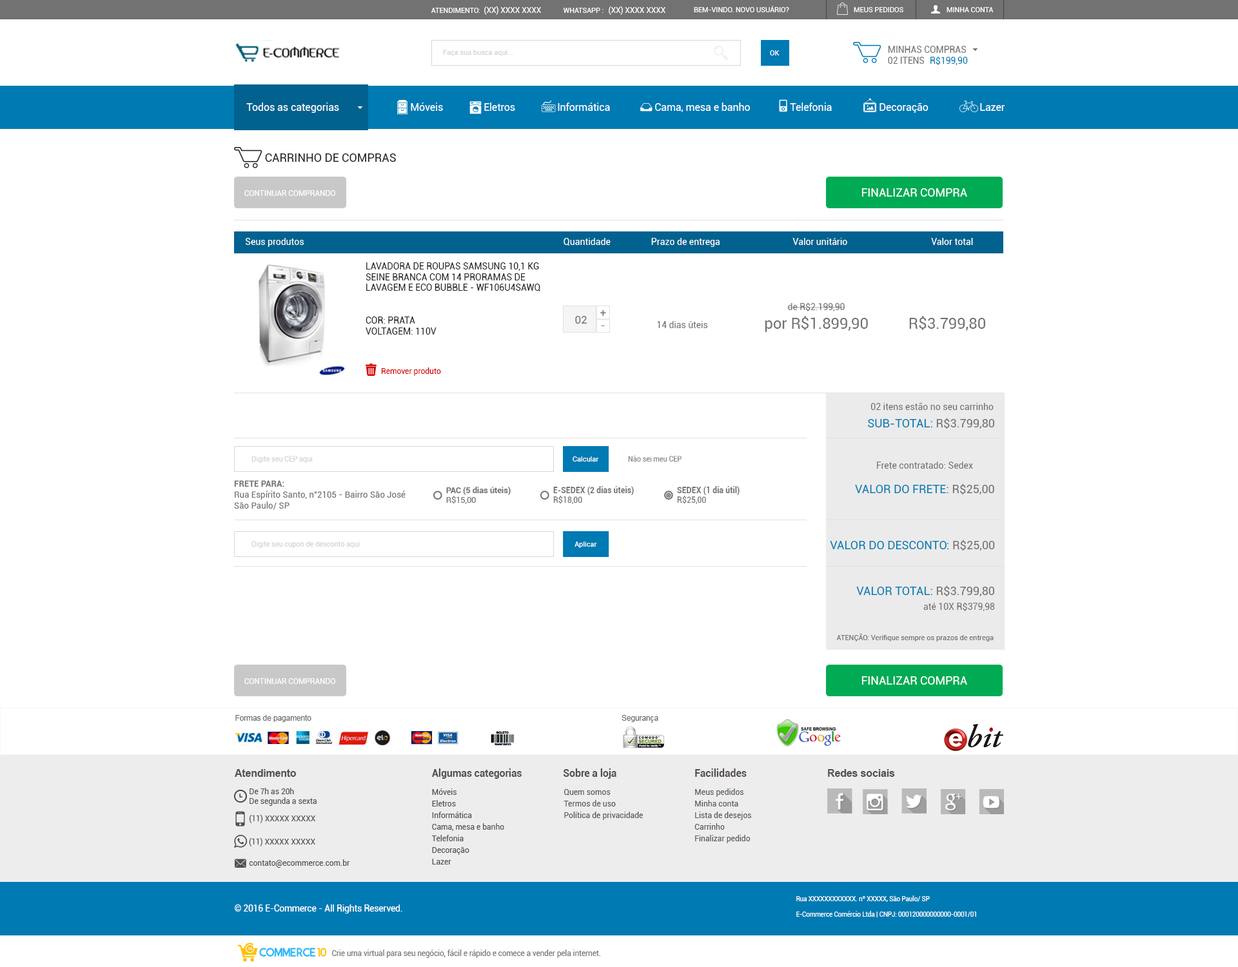
<style>
.page{position:relative;width:1238px;height:967px;background:#ffffff}
.page>*{position:absolute;margin:0}
.t1{font:8px "Roboto-Regular";letter-spacing:-0.005em;color:#ffffff;text-transform:uppercase;scale:0.96 1}
.t2{font:7.1px "Roboto-Regular";letter-spacing:-0.005em;color:#ffffff;text-transform:uppercase}
.t3{font:7.3px "Roboto-Regular";letter-spacing:-0.005em;color:#ffffff;text-transform:uppercase;scale:0.96 1}
.t4{font:7.1px "Roboto-Regular";letter-spacing:-0.005em;color:#d3d3d3}
.t5{font:7.1px "Roboto-Regular";letter-spacing:-0.005em;color:#ffffff}
.t6{font:8.9px "Roboto-Regular";letter-spacing:-0.005em;color:#727272;text-transform:uppercase}
.t7{font:8.9px "Roboto-Regular";letter-spacing:-0.005em;color:#007ab3;text-transform:uppercase}
.t8{font:10.3px "Roboto-Regular";letter-spacing:-0.005em;color:#ffffff}
.t9{font:11.6px "Roboto-Regular";color:#212121;text-transform:uppercase}
.t10{font:7.7px "Roboto-Regular";color:#ffffff;text-transform:uppercase}
.t11{font:11.6px "Roboto-Regular";color:#ffffff;text-transform:uppercase}
.t12{font:9px "Roboto-Regular";color:#ffffff}
.t13{font:9px "Roboto-Regular";color:#212121;text-transform:uppercase}
.t14{font:15.5px "Roboto-Regular";color:#717171}
.t15{font:9px "Roboto-Regular";color:#717171}
.t16{font:11px "Roboto-Regular";color:#727272}
.t17{font:7.7px "Roboto-Regular";color:#d20000}
.t18{font:11.6px "Roboto-Regular";color:#717171}
.t19{font:11.6px "Roboto-Regular";color:#007ab3;text-transform:uppercase}
.t20{font:11.6px "Roboto-Regular";color:#007ab3}
.t21{font:7.4px "Roboto-Regular";letter-spacing:-0.005em;color:#d3d3d3;scale:0.95 1}
.t22{font:7.4px "Roboto-Regular";letter-spacing:-0.005em;color:#878787;scale:0.95 1}
.t23{font:9px "Roboto-Regular";color:#717171;scale:0.95 1}
.t24{font:9px "Roboto-Bold";color:#717171;text-transform:uppercase;scale:0.95 1}
.t25{font:8.1px "Roboto-Bold";color:#717171}
.t26{font:8.1px "Roboto-Bold";color:#717171;text-transform:uppercase}
.t27{font:8.1px "Roboto-Regular";color:#717171;text-transform:uppercase}
.t28{font:7.1px "Roboto-Regular";color:#717171}
.t29{font:7.7px "ArialMT";letter-spacing:-0.01em;color:#6a6a6a}
.t30{font:10.3px "Arial-BoldMT";letter-spacing:-0.01em;color:#544f4d}
.t31{font:10.3px "Roboto-Bold";letter-spacing:-0.01em;color:#544f4d}
.t32{font:7.8px "Roboto-Regular";color:#544f4d}
.t33{font:7.7px/11.6px "Roboto-Regular";color:#544f4d}
.t34{font:9px "Roboto-Regular";color:#ffffff;scale:0.97 1}
.t35{font:6.4px "Roboto-Regular";color:#ffffff;scale:0.97 1}
.t36{font:7.7px "Roboto-Regular";color:#757575;scale:0.97 1}
</style>
<div class="page">
<p class="t1" style="left:484px;top:6px;width:57px;height:9px">(xx) xxxx xxxx</p>
<p class="t1" style="left:609px;top:6px;width:57px;height:9px">(xx) xxxx xxxx</p>
<p class="t2" style="left:694px;top:6px;width:95px;height:6px">Bem-vindo. Novo usuário?</p>
<p class="t3" style="left:431px;top:8px;width:49px;height:5px">Atendimento:</p>
<p class="t3" style="left:563px;top:8px;width:41px;height:5px">WhatsapP :</p>
<p class="t2" style="left:854px;top:7px;width:49px;height:5px">Meus pedidos</p>
<p class="t2" style="left:947px;top:7px;width:47px;height:5px">Minha Conta</p>
<p class="t4" style="left:443px;top:50px;width:70px;height:6px">Faça sua busca aqui...</p>
<p class="t5" style="left:770px;top:50px;width:10px;height:5px">OK</p>
<p class="t6" style="left:888px;top:46px;width:79px;height:7px">Minhas compras</p>
<p class="t6" style="left:888px;top:57px;width:37px;height:7px">02 itens</p>
<p class="t7" style="left:931px;top:56px;width:37px;height:9px">R$199,90</p>
<p class="t8" style="left:246px;top:103px;width:93px;height:10px">Todos as categorias</p>
<p class="t8" style="left:411px;top:103px;width:32px;height:8px">Móveis</p>
<p class="t8" style="left:484px;top:103px;width:31px;height:8px">Eletros</p>
<p class="t8" style="left:558px;top:103px;width:52px;height:8px">Informática</p>
<p class="t8" style="left:655px;top:103px;width:95px;height:9px">Cama, mesa e banho</p>
<p class="t8" style="left:790px;top:103px;width:42px;height:8px">Telefonia</p>
<p class="t8" style="left:880px;top:103px;width:49px;height:10px">Decoração</p>
<p class="t8" style="left:980px;top:103px;width:25px;height:8px">Lazer</p>
<p class="t9" style="left:265px;top:153px;width:131px;height:9px">Carrinho de compras</p>
<p class="t10" style="left:244px;top:190px;width:91px;height:6px">Continuar comprando</p>
<p class="t11" style="left:862px;top:188px;width:105px;height:9px">Finalizar compra</p>
<p class="t12" style="left:246px;top:238px;width:58px;height:9px">Seus produtos</p>
<p class="t12" style="left:564px;top:238px;width:47px;height:8px">Quantidade</p>
<p class="t12" style="left:651px;top:238px;width:69px;height:9px">Prazo de entrega</p>
<p class="t12" style="left:793px;top:238px;width:54px;height:7px">Valor unitário</p>
<p class="t12" style="left:931px;top:238px;width:42px;height:7px">Valor total</p>
<p class="t13" style="left:366px;top:262px;width:174px;height:29px">Lavadora de Roupas Samsung 10,1 kg Seine Branca com 14 Proramas de Lavagem e Eco Bubble - WF106U4SAWQ</p>
<p class="t14" style="left:765px;top:302px;width:103px;height:30px;text-align:center"><span class="t15">de R$2.199,90<br></span>por R$1.899,90</p>
<p class="t13" style="left:366px;top:317px;width:71px;height:18px">Cor: prata<br>Voltagem: 110v</p>
<p class="t16" style="left:575px;top:316px;width:12px;height:8px">02</p>
<p class="t16" style="left:600px;top:310px;width:6px;height:6px">+</p>
<p class="t14" style="left:909px;top:316px;width:76px;height:15px">R$3.799,80</p>
<p class="t16" style="left:601px;top:326px;width:4px;height:0px">-</p>
<p class="t15" style="left:657px;top:321px;width:51px;height:7px">14 dias úteis</p>
<p class="t17" style="left:381px;top:368px;width:60px;height:8px">Remover produto</p>
<p class="t15" style="left:871px;top:403px;width:123px;height:7px">02 itens estão no seu carrinho</p>
<p class="t18" style="left:868px;top:418px;width:126px;height:11px"><span class="t19">Sub-Total</span><span class="t20">:</span> R$3.799,80</p>
<p class="t21" style="left:252px;top:456px;width:60px;height:7px">Digite seu CEP aqui</p>
<p class="t5" style="left:573px;top:457px;width:25px;height:5px">Calcular</p>
<p class="t22" style="left:628px;top:456px;width:54px;height:6px">Não sei meu CEP</p>
<p class="t15" style="left:877px;top:462px;width:96px;height:7px">Frete contratado: Sedex</p>
<p class="t23" style="left:234px;top:480px;width:172px;height:30px"><span class="t24">Frete para:<br></span>Rua Espírito Santo, n°2105 - Bairro São José<br>São Paulo/ SP</p>
<p class="t19" style="left:855px;top:484px;width:139px;height:11px">Valor do frete<span class="t20">:</span><span class="t18"> R$25,00</span></p>
<p class="t25" style="left:446px;top:487px;width:65px;height:17px"><span class="t26">Pac </span>(5 dias úteis) <br><span class="t27">R$15,00</span></p>
<p class="t25" style="left:553px;top:486px;width:81px;height:18px"><span class="t26">E-Sedex</span> (2 dias úteis)<br><span class="t27">R$18,00</span></p>
<p class="t25" style="left:677px;top:486px;width:63px;height:18px"><span class="t26">Sedex </span>(1 dia útil) <br><span class="t27">R$25,00</span></p>
<p class="t21" style="left:252px;top:541px;width:108px;height:7px">Digite seu cupon de desconto aqui</p>
<p class="t5" style="left:575px;top:542px;width:22px;height:6px">Aplicar</p>
<p class="t19" style="left:830px;top:540px;width:165px;height:11px">Valor do desconto<span class="t20">:</span><span class="t18"> R$25,00</span></p>
<p class="t19" style="left:856px;top:586px;width:138px;height:11px">Valor Total<span class="t20">:</span><span class="t18"> R$3.799,80</span></p>
<p class="t15" style="left:923px;top:602px;width:72px;height:9px">até 10X R$379,98</p>
<p class="t28" style="left:836px;top:634px;width:158px;height:8px">ATENÇÃO: Verifique sempre os prazos de entrega</p>
<p class="t11" style="left:862px;top:676px;width:105px;height:9px">Finalizar compra</p>
<p class="t10" style="left:244px;top:678px;width:91px;height:6px">Continuar comprando</p>
<p class="t29" style="left:235px;top:715px;width:76px;height:7px">Formas de pagamento</p>
<p class="t29" style="left:622px;top:715px;width:36px;height:8px">Segurança</p>
<p class="t30" style="left:235px;top:769px;width:62px;height:8px">Atendimento</p>
<p class="t31" style="left:432px;top:769px;width:90px;height:10px">Algumas categorias</p>
<p class="t31" style="left:563px;top:769px;width:54px;height:10px">Sobre a loja</p>
<p class="t31" style="left:695px;top:769px;width:52px;height:8px">Facilidades</p>
<p class="t30" style="left:828px;top:769px;width:67px;height:8px">Redes sociais</p>
<p class="t32" style="left:250px;top:788px;width:67px;height:18px">De 7h as 20h<br>De segunda a sexta</p>
<p class="t33" style="left:431px;top:789px;width:73px;height:76px">Móveis<br>Eletros<br>Informática<br>Cama, mesa e banho<br>Telefonia<br>Decoração <br>Lazer</p>
<p class="t33" style="left:564px;top:789px;width:79px;height:31px;opacity:0.97">Quem somos<br>Termos de uso<br>Política de privacidade</p>
<p class="t33" style="left:695px;top:789px;width:56px;height:55px;opacity:0.97">Meus pedidos<br>Minha conta<br>Lista de desejos<br>Carrinho<br>Finalizar pedido</p>
<p class="t32" style="left:249px;top:814px;width:66px;height:10px">(11) XXXXX XXXXX</p>
<p class="t32" style="left:249px;top:838px;width:66px;height:9px">(11) XXXXX XXXXX</p>
<p class="t32" style="left:249px;top:860px;width:101px;height:8px">contato@ecommerce.com.br</p>
<p class="t34" style="left:235px;top:905px;width:167px;height:9px">© 2016 E-Commerce - All Rights Reserved.</p>
<p class="t35" style="left:796px;top:896px;width:134px;height:6px">Rua XXXXXXXXXXXX. nº XXXXX, São Paulo/ SP</p>
<p class="t35" style="left:796px;top:911px;width:180px;height:7px">E-Commerce Comércio Ltda | CNPJ: 000120000000000-0001/01</p>
<p class="t36" style="left:332px;top:950px;width:268px;height:8px">Crie uma virtual para seu negócio, fácil e rápido e comece a vender pela internet.</p>
</div>
